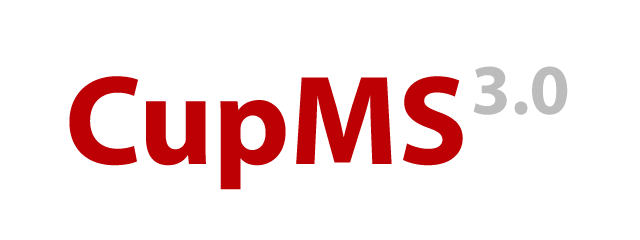
<style>
.page{position:relative;width:640px;height:240px;background:#ffffff}
.page>*{position:absolute;margin:0}
.t1{font:128px "MyriadPro-Bold";color:#bc0003}
.t2{font:72px "MyriadPro-Bold";color:#bcbcbc}
</style>
<div class="page">
<p class="t1" style="left:69px;top:76px;width:394px;height:114px">CupMS</p>
<p class="t2" style="left:473px;top:66px;width:95px;height:49px">3.0</p>
</div>
